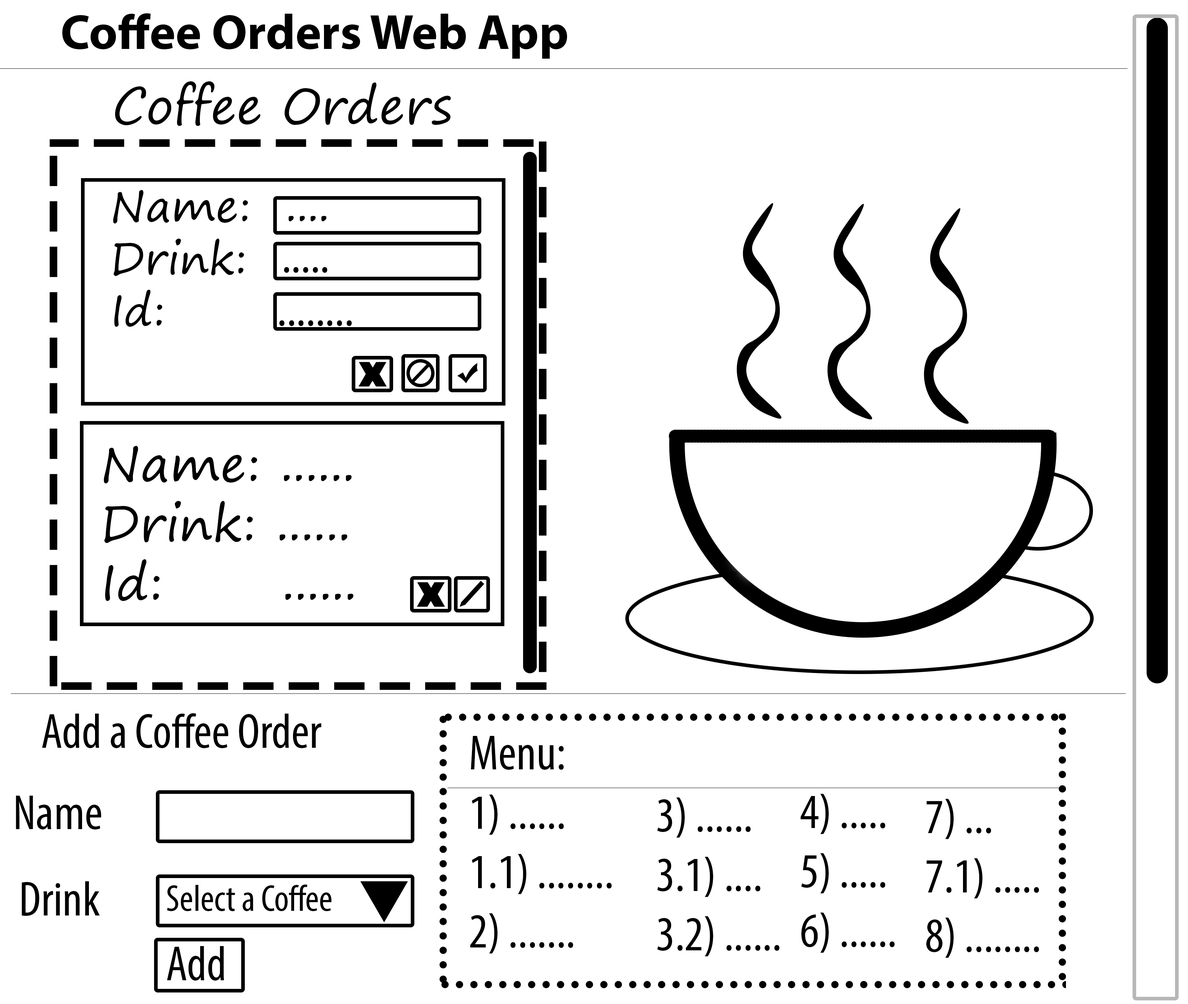
<style>
.page{position:relative;width:1188px;height:1004px;background:#ffffff}
.page>*{position:absolute;margin:0}
.t1{font:49.5px "MyriadPro-Bold";color:#000000}
.t2{font:49.5px "SegoePrint";color:#000000}
.t3{font:43.5px "SegoePrint";color:#000000}
.t4{font:49.5px "MyriadPro-Cond";color:#000000}
.t5{font:37.5px "MyriadPro-Cond";color:#000000}
</style>
<div class="page">
<p class="t1" style="left:62px;top:13px;width:505px;height:46px">Coffee Orders Web App</p>
<p class="t2" style="left:115px;top:81px;width:336px;height:45px">Coffee Orders</p>
<p class="t3" style="left:113px;top:190px;width:213px;height:137px">Name:  ....<br>Drink: <br>Id:</p>
<p class="t4" style="left:284px;top:267px;width:43px;height:6px">.....</p>
<p class="t4" style="left:279px;top:320px;width:73px;height:6px">........</p>
<p class="t2" style="left:104px;top:446px;width:249px;height:155px">Name: ......<br>Drink: ......<br>Id:      ......</p>
<p class="t4" style="left:42px;top:713px;width:279px;height:36px">Add a Coffee Order</p>
<p class="t4" style="left:470px;top:736px;width:141px;height:218px">Menu:<br>1) ......<br>1.1) ........<br>2) .......</p>
<p class="t4" style="left:16px;top:795px;width:85px;height:35px">Name</p>
<p class="t4" style="left:657px;top:797px;width:122px;height:160px">3) ......<br>3.1) ....<br>3.2) ......</p>
<p class="t4" style="left:800px;top:794px;width:94px;height:159px">4) .....<br>5) .....<br>6) ......</p>
<p class="t4" style="left:926px;top:799px;width:113px;height:159px">7) ...<br>7.1) .....<br>8) ........</p>
<p class="t4" style="left:22px;top:881px;width:78px;height:35px">Drink</p>
<p class="t5" style="left:167px;top:884px;width:164px;height:28px">Select a Coffee</p>
<p class="t4" style="left:167px;top:946px;width:57px;height:35px">Add</p>
</div>
